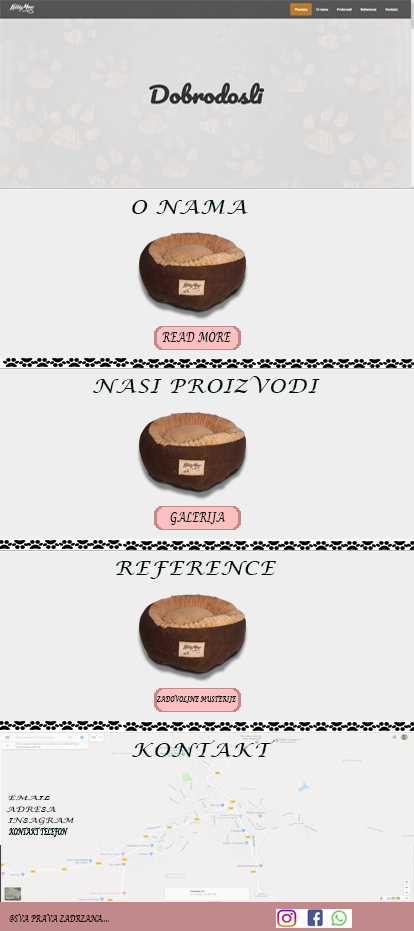
<style>
.page{position:relative;width:414px;height:931px;background:#eeeeee}
.page>*{position:absolute;margin:0}
.t1{font:20px "LucidaCalligraphy-Italic";letter-spacing:0.04em;color:#001111;text-transform:uppercase;scale:1.07 1}
.t2{font:13.9px "LucidaCalligraphy-Italic";letter-spacing:0.04em;color:#001111;text-transform:uppercase;scale:0.63 1}
.t3{font:7.9px "LucidaCalligraphy-Italic";letter-spacing:0.04em;color:#001111;text-transform:uppercase;scale:0.63 1}
.t4{font:6px "LucidaCalligraphy-Italic";letter-spacing:0.04em;color:#001111;text-transform:uppercase;scale:1.68 1}
.t5{font:7.3px "LucidaCalligraphy-Italic";letter-spacing:0.04em;color:#001111;text-transform:uppercase;scale:1.27 1}
.t6{font:9px "LucidaCalligraphy-Italic";letter-spacing:0.04em;color:#000000;text-transform:uppercase;scale:0.63 1}
</style>
<div class="page">
<p class="t1" style="left:132px;top:200px;width:116px;height:14px">O NAMA</p>
<p class="t2" style="left:162px;top:332px;width:69px;height:10px">READ MORE</p>
<p class="t1" style="left:92px;top:376px;width:228px;height:17px">Nasi proizvodi</p>
<p class="t2" style="left:170px;top:512px;width:56px;height:13px">Galerija</p>
<p class="t1" style="left:116px;top:561px;width:160px;height:18px">Reference</p>
<p class="t3" style="left:156px;top:695px;width:80px;height:8px">Zadovoljne Musterije</p>
<p class="t1" style="left:131px;top:740px;width:144px;height:17px">Kontakt</p>
<p class="t4" style="left:8px;top:795px;width:42px;height:6px">Email</p>
<p class="t5" style="left:6px;top:806px;width:50px;height:7px">Adresa</p>
<p class="t5" style="left:8px;top:817px;width:66px;height:8px">Insagram</p>
<p class="t6" style="left:9px;top:914px;width:100px;height:8px">@sva prava zadrzana....</p>
</div>
